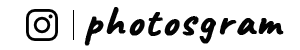
<style>
.page{position:relative;width:300px;height:50px;background:#ffffff}
.page>*{position:absolute;margin:0}
.t1{font:41.7px "Caveat-Bold";letter-spacing:0.05em;color:#030303;font-weight:bold}
</style>
<div class="page">
<p class="t1" style="left:84px;top:7px;width:200px;height:39px">photosgram</p>
</div>
